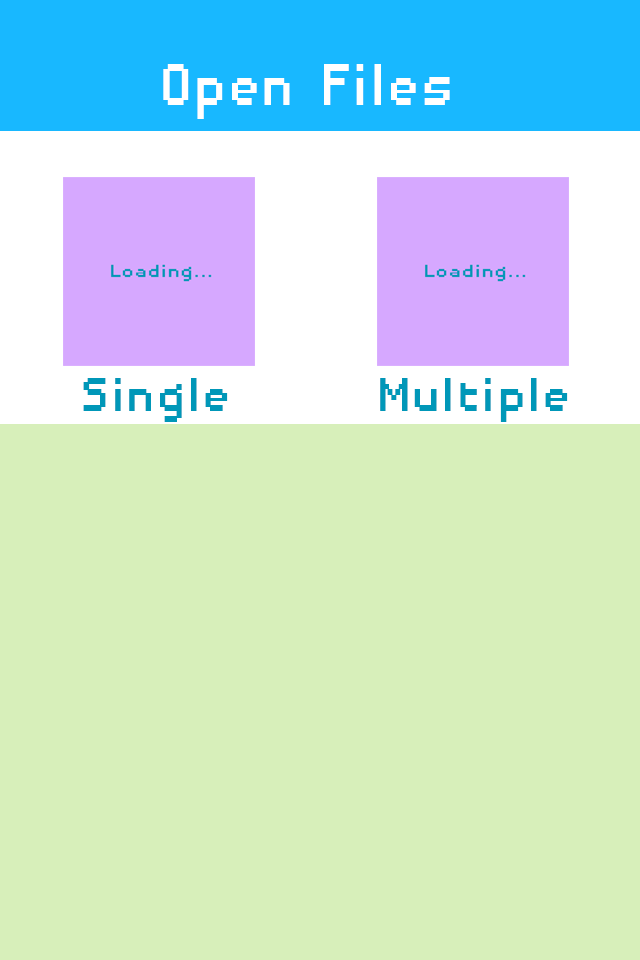
<style>
.page{position:relative;width:640px;height:960px;background:#d7efba}
.page>*{position:absolute;margin:0}
.t1{font:76.6px "DisposableDroidBB";color:#ffffff;scale:0.91 1}
.t2{font:62px "DisposableDroidBB";color:#0097b8}
</style>
<div class="page">
<p class="t1" style="left:163px;top:64px;width:287px;height:55px">Open Files</p>
<p class="t2" style="left:83px;top:378px;width:145px;height:44px">Single</p>
<p class="t2" style="left:380px;top:378px;width:188px;height:44px">Multiple</p>
</div>
